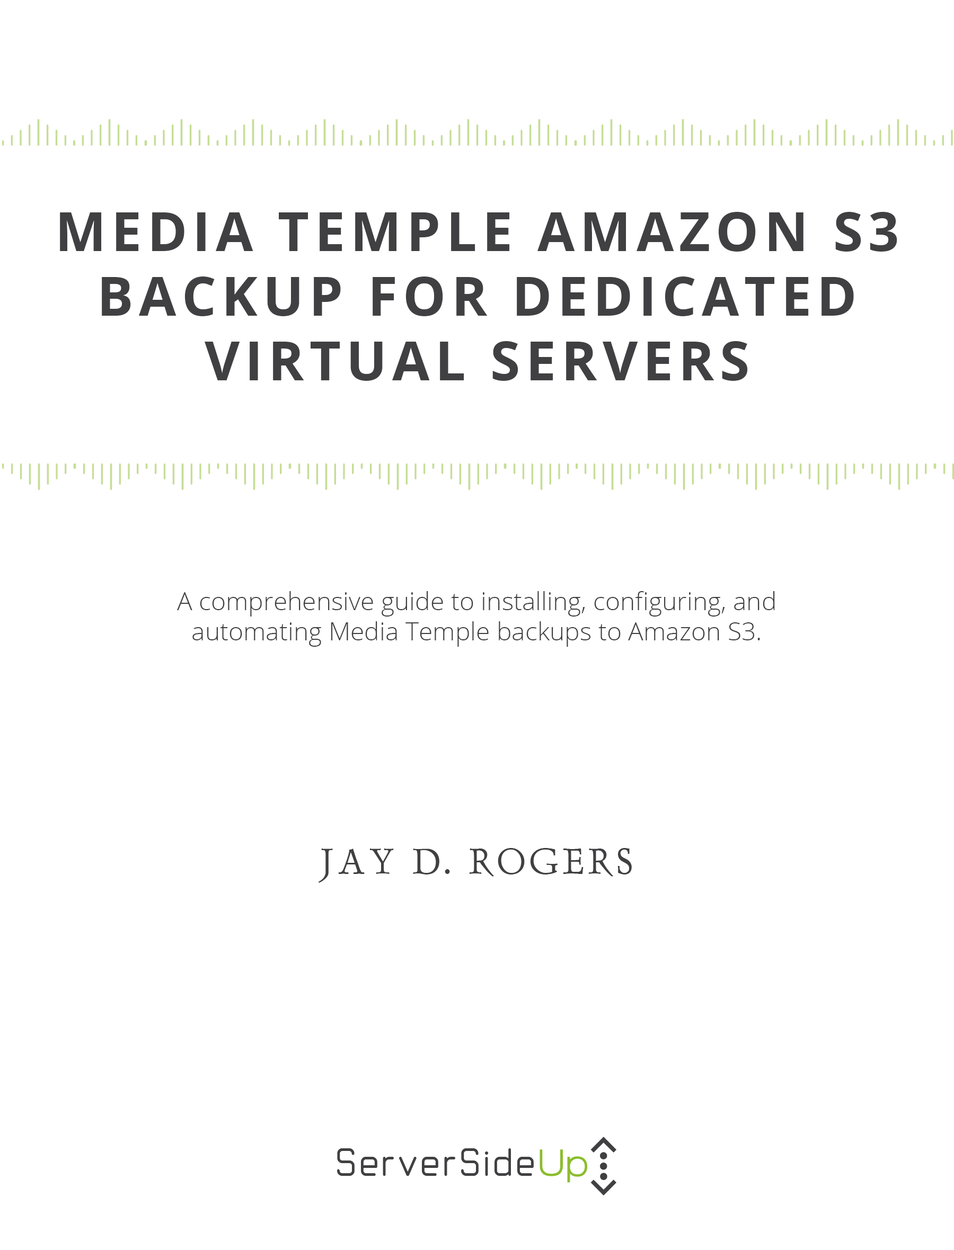
<style>
.page{position:relative;width:954px;height:1250px;background:#ffffff}
.page>*{position:absolute;margin:0}
.t1{font:54px "OpenSans-Bold";letter-spacing:0.1em;color:#404042;text-transform:uppercase}
.t2{font:25.4px "OpenSans-Light";color:#404042}
.t3{font:41.3px "Delphin";letter-spacing:0.1em;color:#404042;text-transform:uppercase}
</style>
<div class="page">
<p class="t1" style="left:60px;top:212px;width:837px;height:169px;text-align:center">Media Temple Amazon S3 Backup for Dedicated Virtual Servers</p>
<p class="t2" style="left:177px;top:591px;width:598px;height:56px;text-align:center">A comprehensive guide to installing, configuring, and automating Media Temple backups to Amazon S3.</p>
<p class="t3" style="left:318px;top:848px;width:314px;height:35px">Jay D. Rogers</p>
</div>
